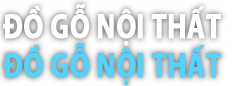
<style>
.page{position:relative;width:243px;height:86px;background:#ffffff}
.page>*{position:absolute;margin:0}
.t1{font:35px "MyriadPro-Bold";color:#ffffff;font-weight:bold;scale:0.79 1}
.t2{font:35px "MyriadPro-Bold";color:#55d3fb;font-weight:bold;scale:0.79 1}
</style>
<div class="page">
<p class="t1" style="left:3px;top:4px;width:218px;height:43px">ĐỒ GỖ NỘI THẤT</p>
<p class="t2" style="left:3px;top:43px;width:218px;height:43px">ĐỒ GỖ NỘI THẤT</p>
</div>
